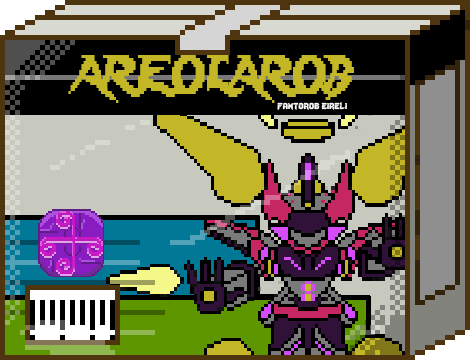
<style>
.page{position:relative;width:470px;height:360px;background:#000000}
.page>*{position:absolute;margin:0}
.t1{font:48px "Lady-Radical";color:#c4b727;scale:0.72 1}
.t2{font:12px "Lady-Radical";color:#fbfbfb}
</style>
<div class="page">
<p class="t1" style="left:68px;top:55px;width:286px;height:48px">AREOLAROB</p>
<p class="t2" style="left:277px;top:102px;width:70px;height:8px">fantorob eireli</p>
</div>
